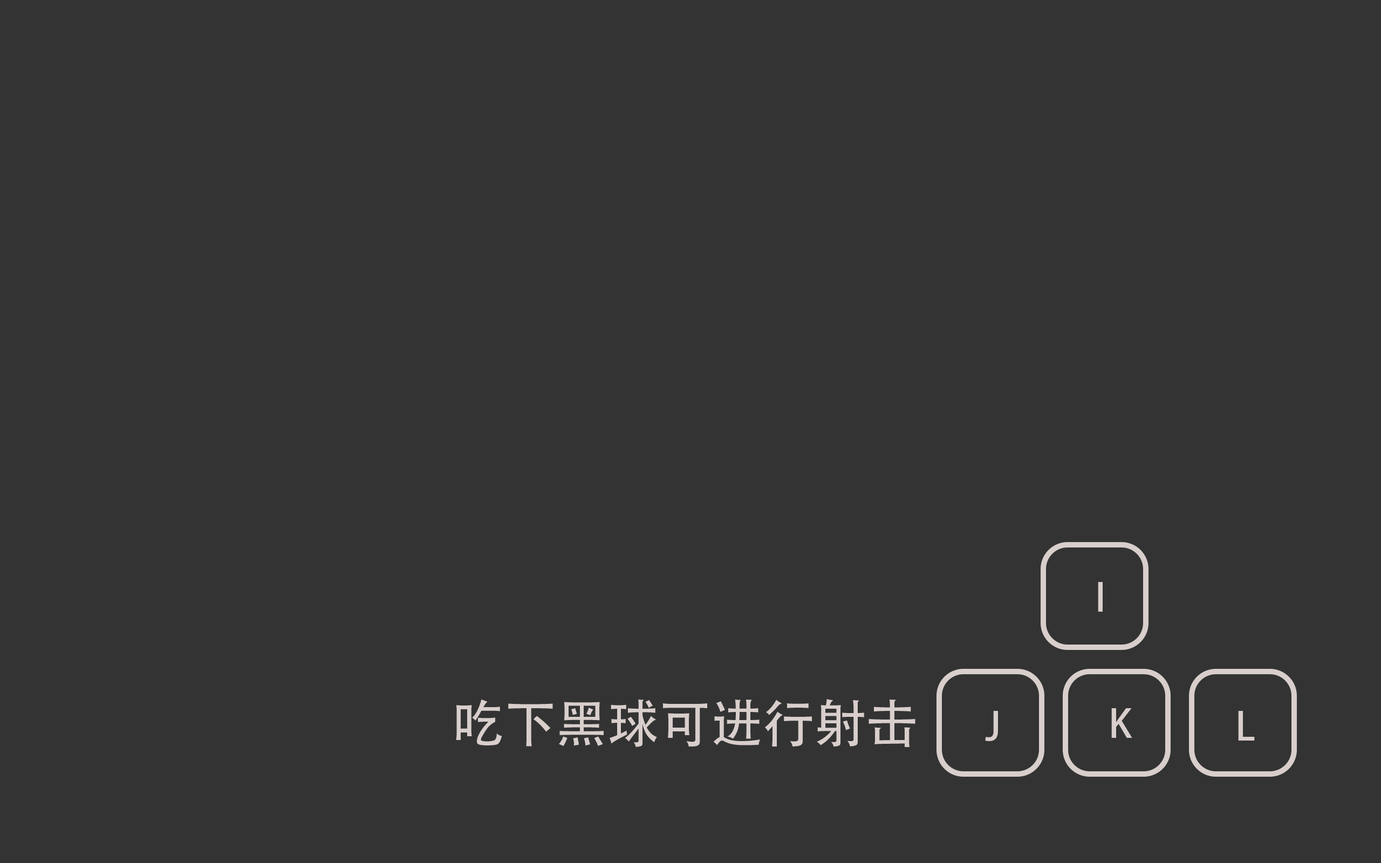
<style>
.page{position:relative;width:1381px;height:863px;background:#333333}
.page>*{position:absolute;margin:0}
.t1{font:38.8px "AdobeHeitiStd-Regular";color:#d8cecb}
.t2{font:51.8px "AdobeHeitiStd-Regular";color:#d8cecb}
</style>
<div class="page">
<p class="t1" style="left:1098px;top:582px;width:5px;height:30px">I</p>
<p class="t2" style="left:456px;top:699px;width:460px;height:48px">吃下黑球可进行射击</p>
<p class="t1" style="left:985px;top:711px;width:13px;height:30px">J</p>
<p class="t1" style="left:1111px;top:708px;width:22px;height:30px">K</p>
<p class="t1" style="left:1238px;top:711px;width:17px;height:30px">L</p>
</div>
